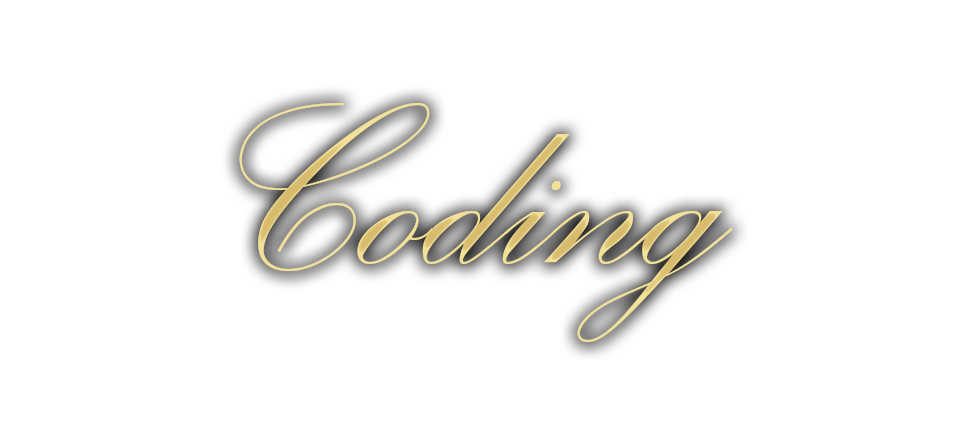
<style>
.page{position:relative;width:960px;height:432px;background:#ffffff}
.page>*{position:absolute;margin:0}
.t1{font:300px "PalaceScriptMT";color:#ccaa5a}
</style>
<div class="page">
<p class="t1" style="left:239px;top:103px;width:493px;height:239px">Coding</p>
</div>
